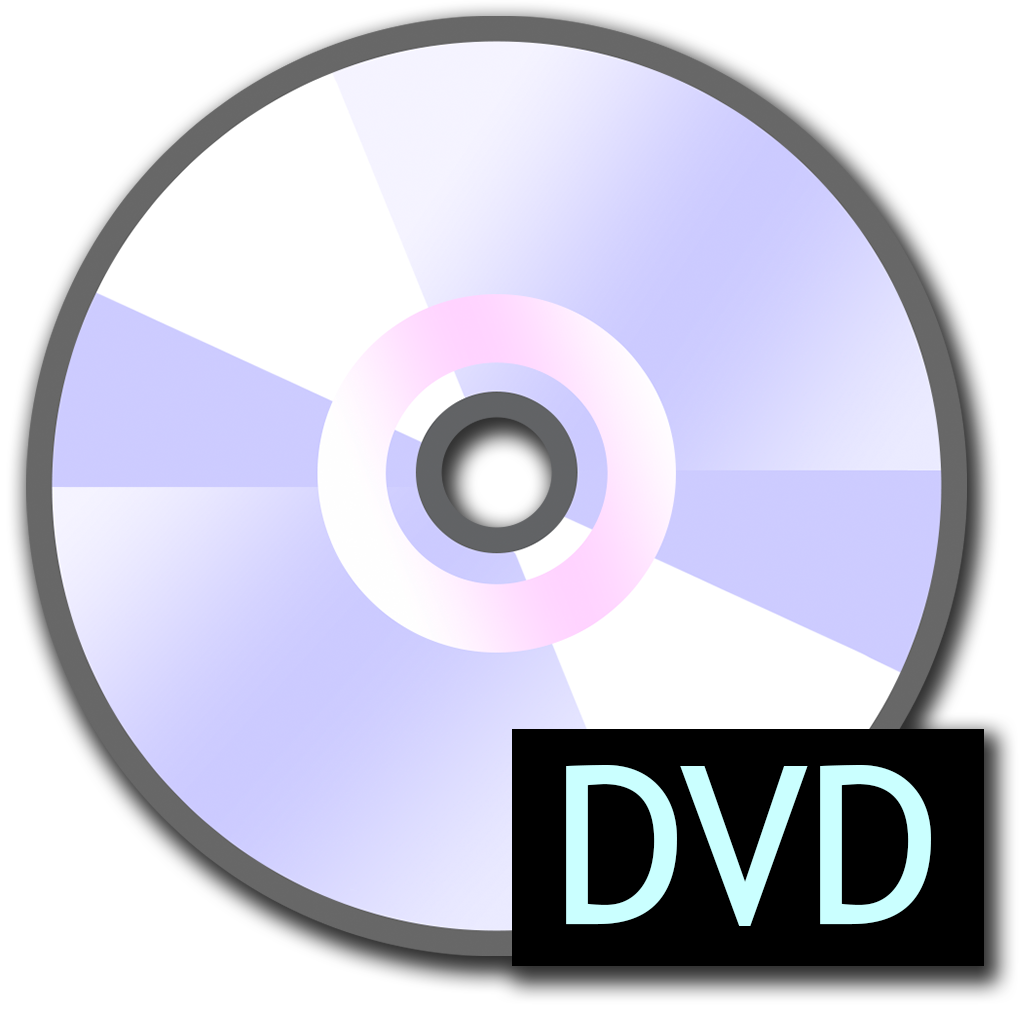
<style>
.page{position:relative;width:1024px;height:1024px;background:#ffffff}
.page>*{position:absolute;margin:0}
.t1{font:220.9px "TrebuchetMS";letter-spacing:-0.025em;color:#caffff}
</style>
<div class="page">
<p class="t1" style="left:566px;top:765px;width:365px;height:161px">DVD</p>
</div>
